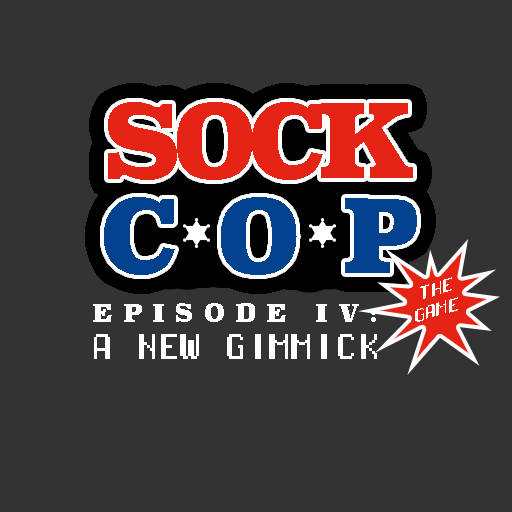
<style>
.page{position:relative;width:512px;height:512px;background:#333333}
.page>*{position:absolute;margin:0}
.t1{font:22.6px/21.4px "PixelOperatorMonoHB";color:#ffffff;scale:1.04 1}
.t2{font:24.8px "Superclarendon-Black";letter-spacing:0.4em;color:#ffffff}
.t3{font:44.4px "PixelOperatorMonoHB";color:#ffffff}
</style>
<div class="page">
<p class="t1" style="left:415px;top:277px;width:43px;height:45px;text-align:center;rotate:-15deg">THE<br>GAME</p>
<p class="t2" style="left:93px;top:303px;width:283px;height:19px">EPISODE IV:</p>
<p class="t3" style="left:94px;top:334px;width:283px;height:25px">A NEW GIMMICK</p>
</div>
